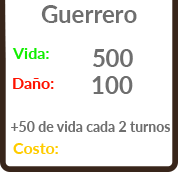
<style>
.page{position:relative;width:178px;height:172px;background:#ffffff}
.page>*{position:absolute;margin:0}
.t1{font:24px "Lato-Bold";color:#6e6e6e}
.t2{font:16px "Lato-Bold";color:#11ee00}
.t3{font:16px "Lato-Bold";color:#ff1200}
.t4{font:14px "Lato-Bold";color:#6e6e6e}
.t5{font:16px "Lato-Bold";color:#ffcc00}
</style>
<div class="page">
<p class="t1" style="left:41px;top:5px;width:96px;height:18px">Guerrero</p>
<p class="t2" style="left:12px;top:48px;width:37px;height:11px">Vida:</p>
<p class="t1" style="left:93px;top:49px;width:40px;height:18px">500</p>
<p class="t3" style="left:13px;top:78px;width:41px;height:11px">Daño:</p>
<p class="t1" style="left:92px;top:76px;width:41px;height:18px">100</p>
<p class="t4" style="left:11px;top:121px;width:159px;height:11px">+50 de vida cada 2 turnos</p>
<p class="t5" style="left:13px;top:143px;width:45px;height:11px">Costo:</p>
</div>
